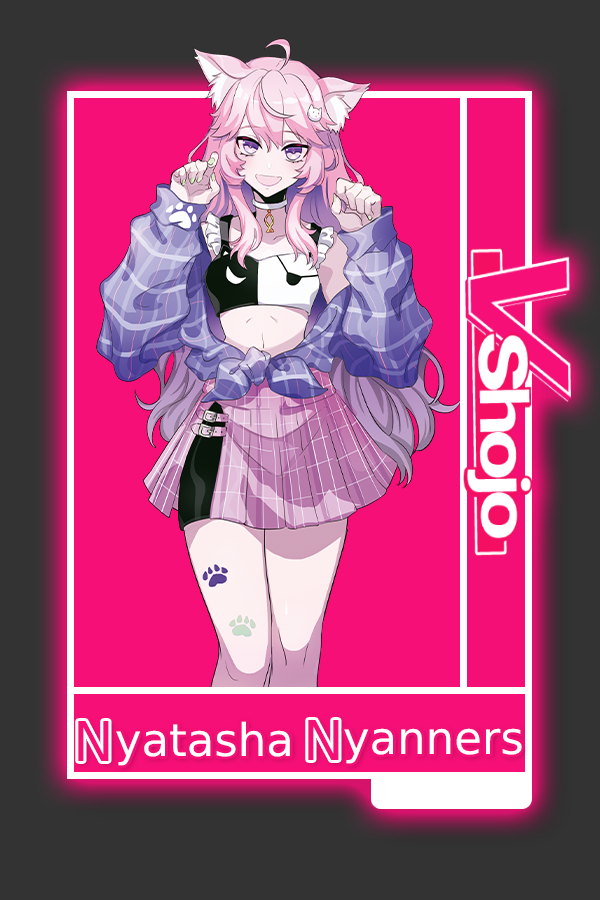
<style>
.page{position:relative;width:600px;height:900px;background:#f50f76}
.page>*{position:absolute;margin:0}
.t1{font:55px "CoolveticaRg-Regular";color:#f50f76}
.t2{font:75px "CoolveticaRg-Regular";color:#f50f76}
.t3{font:45px "CoolveticaRg-Regular";color:#ffffff}
</style>
<div class="page">
<p class="t1" style="left:78px;top:721px;width:31px;height:40px"><span class="t2">   </span>N</p>
<p class="t3" style="left:116px;top:721px;width:174px;height:45px">yatasha</p>
<p class="t1" style="left:308px;top:720px;width:31px;height:40px"><span class="t2">   </span>N</p>
<p class="t3" style="left:344px;top:728px;width:178px;height:36px">yanners</p>
</div>
